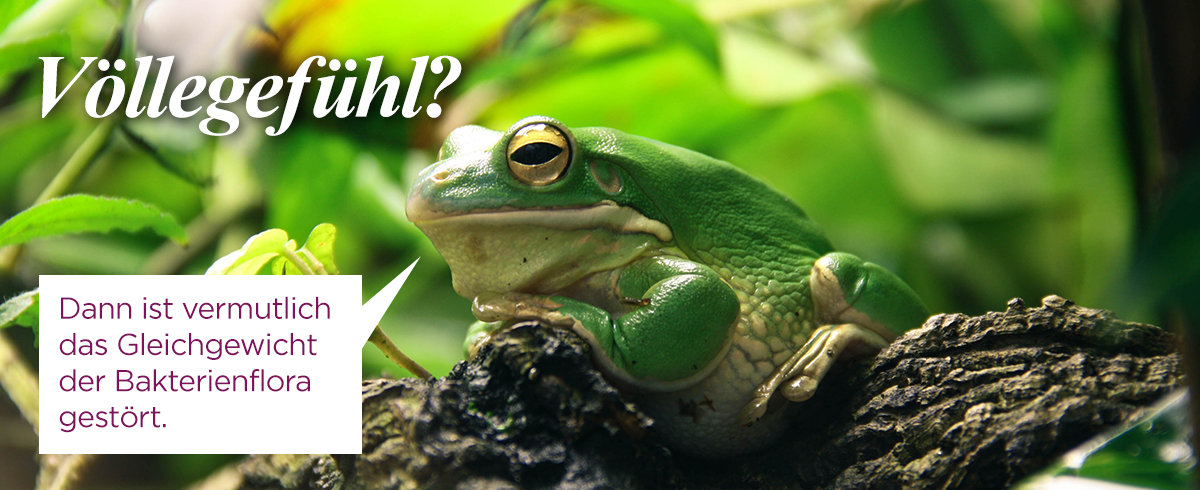
<style>
.page{position:relative;width:1200px;height:490px}
.page>*{position:absolute;margin:0}
.t1{font:89.7px "TimesNewRomanPS-BoldItalicMT";letter-spacing:-0.025em;color:#ffffff}
.t2{font:30.2px "Gotham-Book";letter-spacing:-0.025em;color:#7e125d}
</style>
<div class="page">
<p class="t1" style="left:38px;top:55px;width:424px;height:81px">Völlegefühl?</p>
<p class="t2" style="left:59px;top:296px;width:271px;height:137px">Dann ist vermutlich <br>das Gleichgewicht <br>der Bakterien­flora <br>gestört.</p>
</div>
